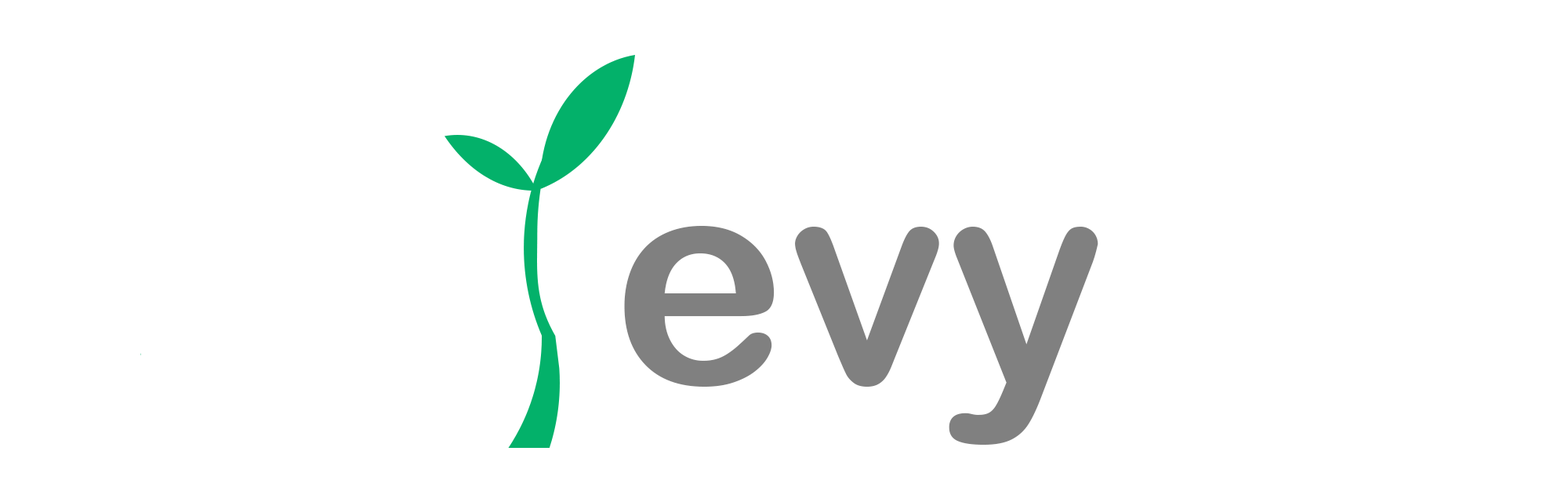
<style>
.page{position:relative;width:1568px;height:502px;background:#ffffff}
.page>*{position:absolute;margin:0}
.t1{font:294.7px "ArialRoundedMTBold";color:#808080}
</style>
<div class="page">
<p class="t1" style="left:624px;top:226px;width:474px;height:219px">evy</p>
<p class="t1" style="left:624px;top:226px;width:474px;height:219px">evy</p>
</div>
